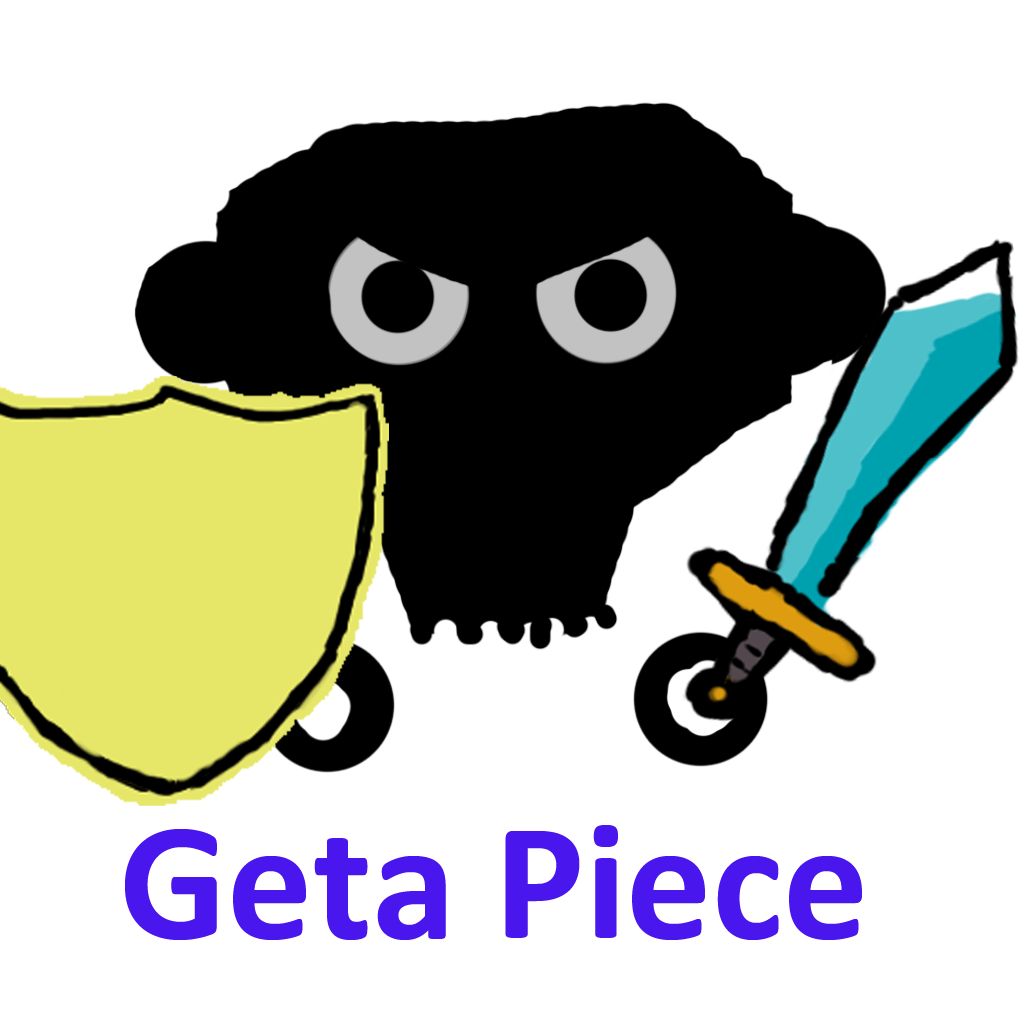
<style>
.page{position:relative;width:1024px;height:1024px;background:#ffffff}
.page>*{position:absolute;margin:0}
.t1{font:170px "Calibri-Bold";color:#4916ee}
</style>
<div class="page">
<p class="t1" style="left:125px;top:825px;width:737px;height:115px">Geta Piece</p>
</div>
